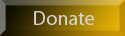
<style>
.page{position:relative;width:125px;height:36px}
.page>*{position:absolute;margin:0}
.t1{font:20px "MyriadPro-Regular";color:#d5d5d5}
</style>
<div class="page">
<p class="t1" style="left:34px;top:11px;width:60px;height:14px">Donate</p>
</div>
